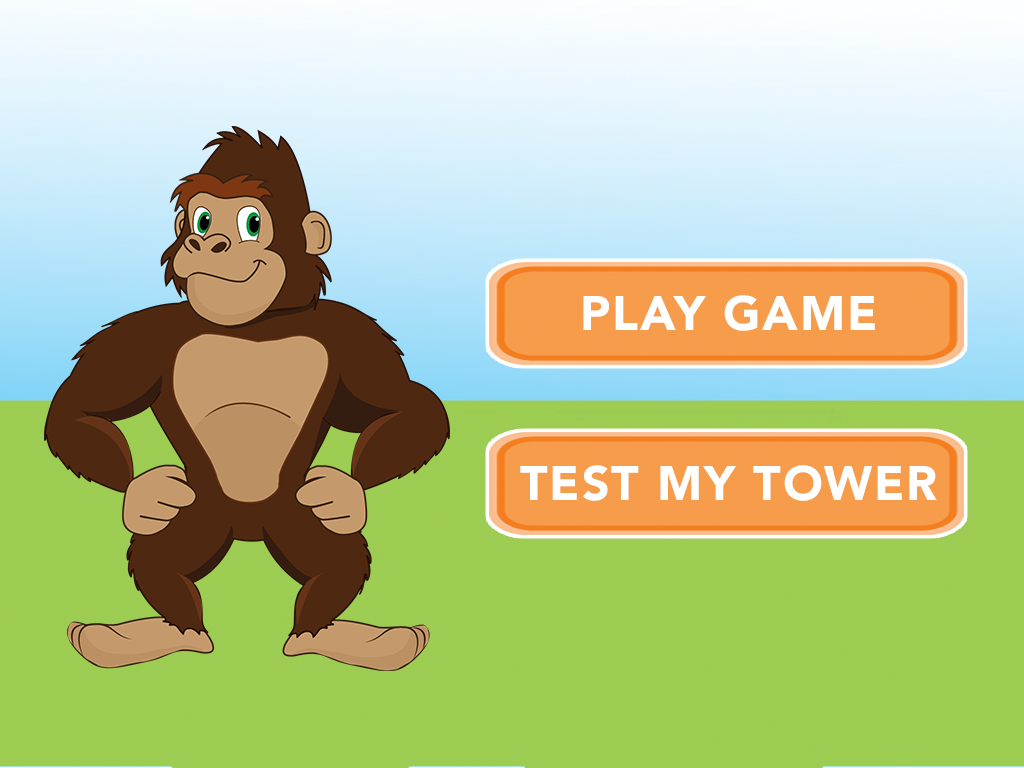
<style>
.page{position:relative;width:1024px;height:768px}
.page>*{position:absolute;margin:0}
.t1{font:48px "Avenir-Black";letter-spacing:0.04em;color:#ffffff}
</style>
<div class="page">
<p class="t1" style="left:583px;top:295px;width:292px;height:36px">PLAY GAME</p>
<p class="t1" style="left:520px;top:465px;width:417px;height:36px">TEST MY TOWER</p>
</div>
